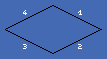
<style>
.page{position:relative;width:107px;height:59px;background:#436ab3}
.page>*{position:absolute;margin:0}
.t1{font:8px "Fontix-Regular";color:#ffffff}
</style>
<div class="page">
<p class="t1" style="left:23px;top:10px;width:4px;height:5px">4</p>
<p class="t1" style="left:78px;top:10px;width:4px;height:5px">1</p>
<p class="t1" style="left:23px;top:44px;width:4px;height:5px">3</p>
<p class="t1" style="left:78px;top:44px;width:4px;height:5px">2</p>
</div>
